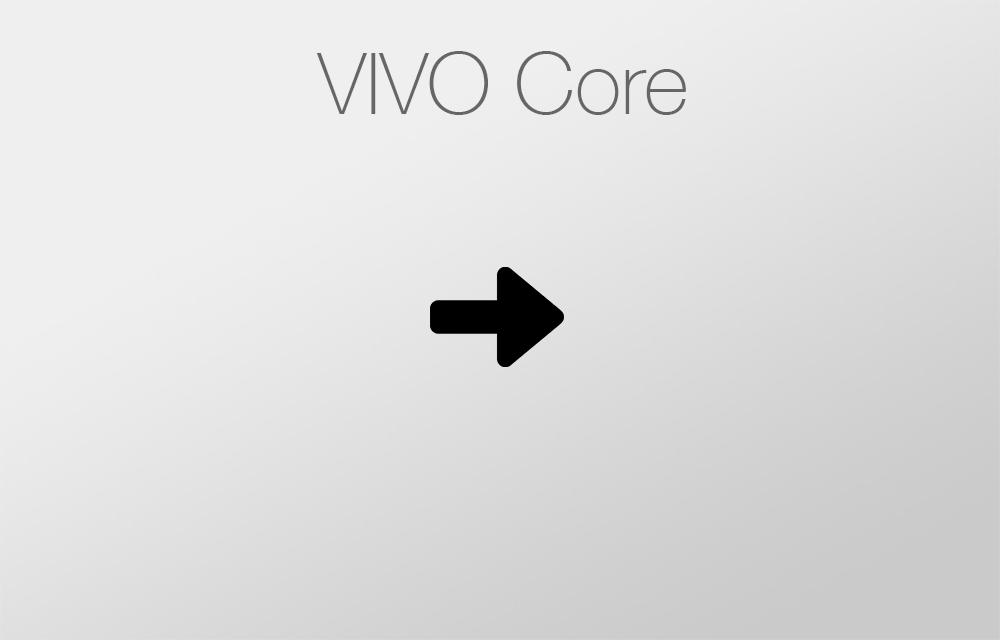
<style>
.page{position:relative;width:1000px;height:640px}
.page>*{position:absolute;margin:0}
.t1{font:85.7px "HelveticaNeue-Thin";color:#666666}
</style>
<div class="page">
<p class="t1" style="left:316px;top:51px;width:370px;height:64px">VIVO Core</p>
</div>
